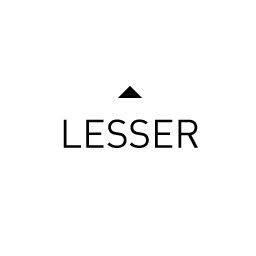
<style>
.page{position:relative;width:256px;height:256px;background:#ffffff}
.page>*{position:absolute;margin:0}
.t1{font:39.2px "DIN-Regular";color:#000000}
</style>
<div class="page">
<p class="t1" style="left:63px;top:119px;width:135px;height:29px">LESSER</p>
</div>
